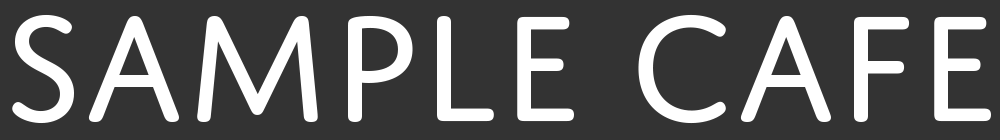
<style>
.page{position:relative;width:1000px;height:140px;background:#333333}
.page>*{position:absolute;margin:0}
.t1{font:161px "DomusTitling";color:#ffffff}
</style>
<div class="page">
<p class="t1" style="left:12px;top:14px;width:979px;height:110px">Sample Cafe</p>
</div>
